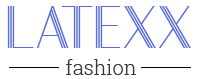
<style>
.page{position:relative;width:200px;height:79px;background:#ffffff}
.page>*{position:absolute;margin:0}
.t1{font:60px "ChelseaII";color:#5a6cd8;text-transform:uppercase}
.t2{font:20px "RobotoSlab-Light";color:#373737}
</style>
<div class="page">
<p class="t1" style="left:7px;top:6px;width:184px;height:42px">latexx</p>
<p class="t2" style="left:66px;top:59px;width:70px;height:16px">fashion</p>
</div>
